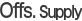
<style>
.page{position:relative;width:82px;height:21px;background:#ffffff}
.page>*{position:absolute;margin:0}
.t1{font:16px "GothicMB101Pro-Medium";letter-spacing:-0.07em;color:#373535;scale:0.8 1}
.t2{font:20px "GothicMB101Pro-Medium";letter-spacing:-0.08em;color:#373535;scale:0.8 1}
</style>
<div class="page">
<p class="t1" style="left:0px;top:2px;width:83px;height:18px"><span class="t2">Offs.</span> Supply</p>
</div>
